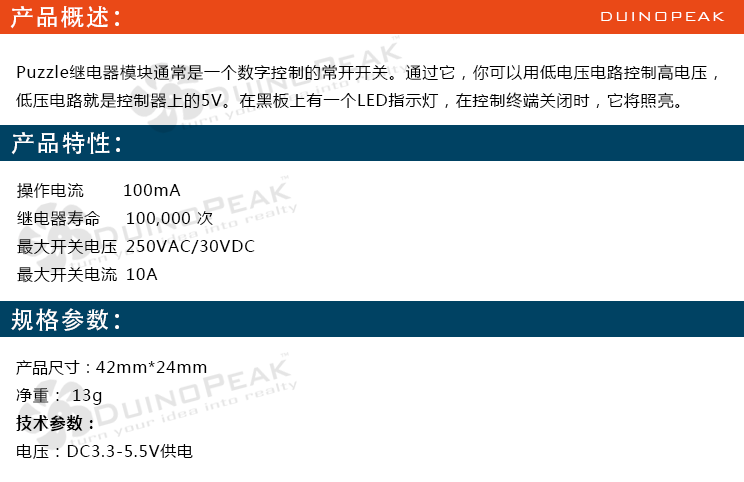
<style>
.page{position:relative;width:744px;height:482px;background:#ffffff}
.page>*{position:absolute;margin:0}
.t1{font:24px "AdobeHeitiStd-Regular";letter-spacing:0.05em;color:#ffffff}
.t2{font:18px "BankGothicBT-Light";letter-spacing:0.05em;color:#ffffff}
.t3{font:16px "MicrosoftYaHei";letter-spacing:0.05em;color:#000000}
.t4{font:16px "MicrosoftYaHei";color:#000000}
.t5{font:16px "MicrosoftYaHei-Bold";letter-spacing:0.05em;color:#000000}
</style>
<div class="page">
<p class="t1" style="left:10px;top:6px;width:109px;height:23px">产品概述：</p>
<p class="t2" style="left:601px;top:12px;width:124px;height:9px">DUINOPEAK</p>
<p class="t3" style="left:16px;top:64px;width:701px;height:45px">Puzzle继电器模块通常是一个数字控制的常开开关。通过它，你可以用低电压电路控制高电压，<br>低压电路就是控制器上的5V。在黑板上有一个LED指示灯，在控制终端关闭时，它将照亮。</p>
<p class="t1" style="left:11px;top:131px;width:109px;height:24px">产品特性：</p>
<p class="t3" style="left:17px;top:183px;width:238px;height:100px">操作电流       100mA<br>继电器寿命 100,000 次<br>最大开关电压 250VAC/30VDC<br>最大开关电流 10A</p>
<p class="t1" style="left:11px;top:308px;width:108px;height:23px">规格参数：</p>
<p class="t3" style="left:16px;top:360px;width:191px;height:99px"><span class="t4">产品尺寸：</span>42mm*24mm<br>净重： 13g<br><span class="t5">技术参数：<br></span>电压：DC3.3-5.5V供电</p>
</div>
